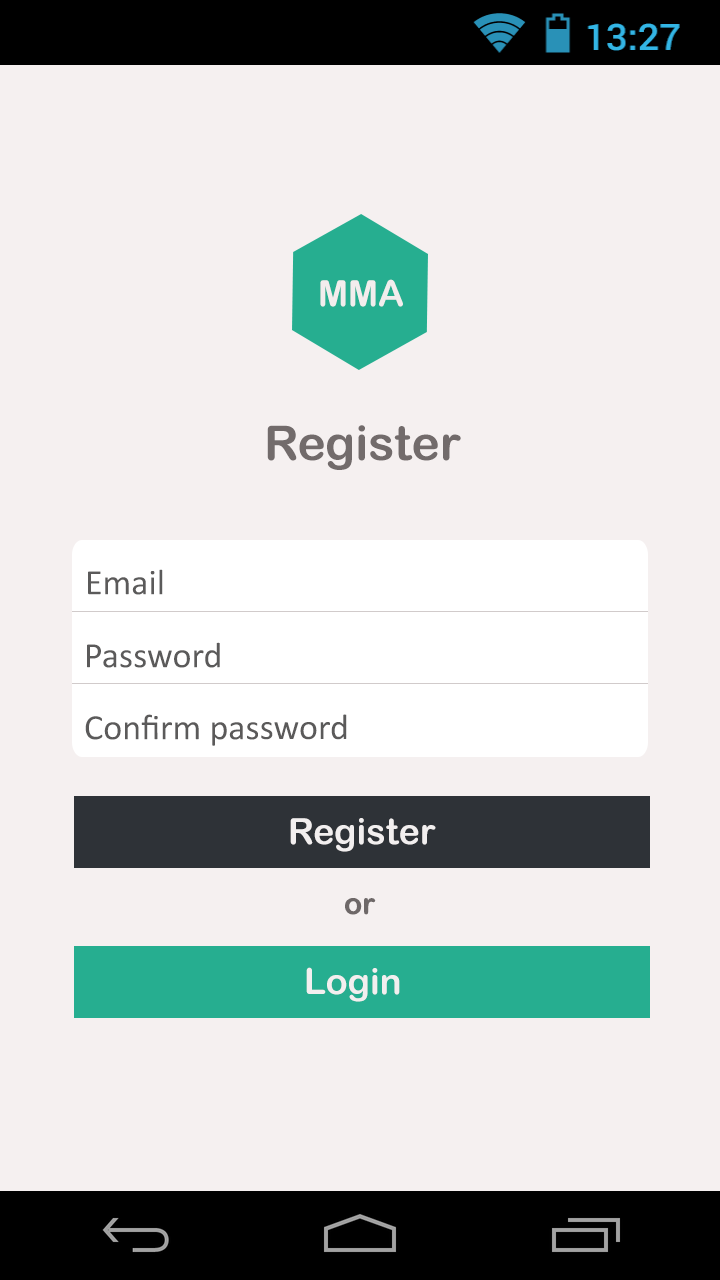
<style>
.page{position:relative;width:720px;height:1280px;background:#f5f0f0}
.page>*{position:absolute;margin:0}
.t1{font:36px "ArialRoundedMTBold";color:#f2eded}
.t2{font:48px "ArialRoundedMTBold";color:#726b6b}
.t3{font:36px "Calibri";color:#5b5a5a}
.t4{font:36px "ArialRoundedMTBold";color:#f2efef}
.t5{font:30px "ArialRoundedMTBold";color:#6e6868}
</style>
<div class="page">
<p class="t1" style="left:320px;top:279px;width:83px;height:28px">MMA</p>
<p class="t2" style="left:267px;top:425px;width:194px;height:45px">Register</p>
<p class="t3" style="left:88px;top:569px;width:75px;height:26px">Email</p>
<p class="t3" style="left:87px;top:642px;width:133px;height:26px">Password</p>
<p class="t3" style="left:85px;top:714px;width:262px;height:32px">Confirm password</p>
<p class="t4" style="left:290px;top:818px;width:146px;height:34px">Register</p>
<p class="t5" style="left:345px;top:898px;width:31px;height:17px">or</p>
<p class="t4" style="left:306px;top:967px;width:94px;height:35px">Login</p>
</div>
